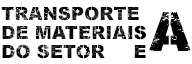
<style>
.page{position:relative;width:192px;height:64px;background:#ffffff}
.page>*{position:absolute;margin:0}
.t1{font:18px/19px "Arial-Black";letter-spacing:0.009em}
</style>
<div class="page">
<p class="t1" style="left:1px;top:6px;width:145px;height:53px">TRANSPORTE<br>DE MATERIAIS<br>DO SETOR     E</p>
</div>
